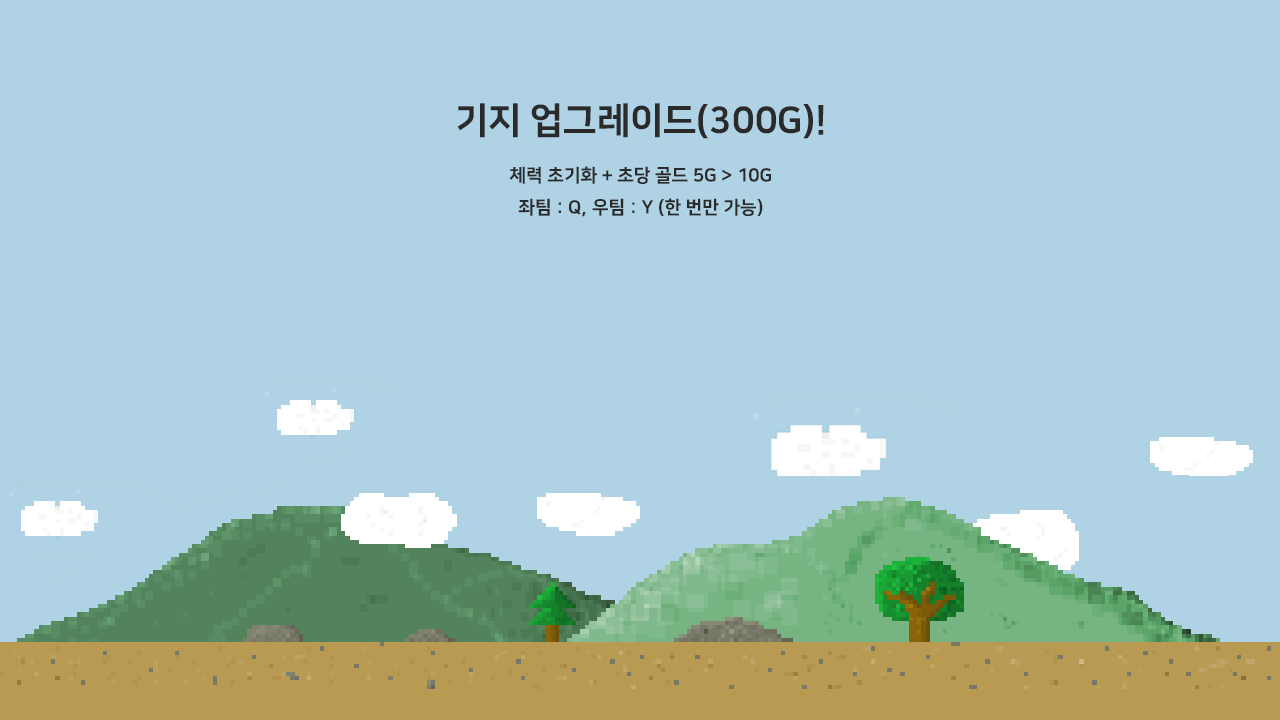
<style>
.page{position:relative;width:1280px;height:720px;background:#b0d2e5}
.page>*{position:absolute;margin:0}
.t1{font:18.2px "NanumSquareEB";color:#2a2a2a}
.t2{font:36.5px "NanumSquareEB";color:#2a2a2a}
</style>
<div class="page">
<p class="t1" style="left:457px;top:103px;width:367px;height:114px;text-align:center"><span class="t2">기지 업그레이드(300G)!<br></span>체력 초기화 + 초당 골드 5G &gt; 10G<br>좌팀 : Q, 우팀 : Y (한 번만 가능)</p>
</div>
